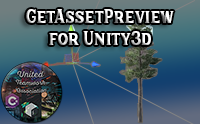
<style>
.page{position:relative;width:200px;height:124px}
.page>*{position:absolute;margin:0}
.t1{font:18px "HanleyPro-Block"}
</style>
<div class="page">
<p class="t1" style="left:26px;top:9px;width:148px;height:36px;text-align:center">GetAssetPreview<br>for Unity3d</p>
</div>
